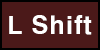
<style>
.page{position:relative;width:100px;height:50px;background:#4b1919}
.page>*{position:absolute;margin:0}
.t1{font:24px "H2gtrE";color:#ffffff}
</style>
<div class="page">
<p class="t1" style="left:9px;top:15px;width:83px;height:20px">L Shift</p>
</div>
